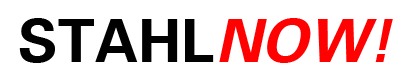
<style>
.page{position:relative;width:417px;height:80px;background:#ffffff}
.page>*{position:absolute;margin:0}
.t1{font:60px "Univers-Bold";color:#010101}
.t2{font:60px "Univers-BoldOblique";color:#ff0101}
</style>
<div class="page">
<p class="t1" style="left:19px;top:18px;width:374px;height:45px">STAHL<span class="t2">NOW!</span></p>
</div>
